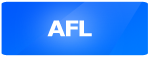
<style>
.page{position:relative;width:150px;height:57px}
.page>*{position:absolute;margin:0}
.t1{font:21.4px "Verdana-Bold";letter-spacing:-0.05em;color:#ffffff;scale:1.1 1}
</style>
<div class="page">
<p class="t1" style="left:47px;top:20px;width:45px;height:17px">AFL</p>
</div>
